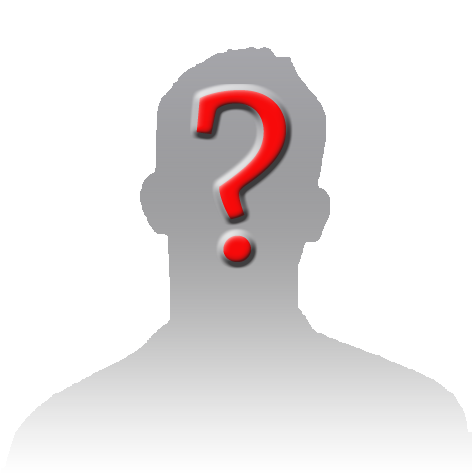
<style>
.page{position:relative;width:474px;height:474px;background:#ffffff}
.page>*{position:absolute;margin:0}
.t1{font:256.8px "ChaparralPro-Regular"}
</style>
<div class="page">
<p class="t1" style="left:196px;top:90px;width:90px;height:172px">?</p>
</div>
